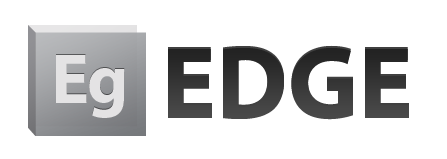
<style>
.page{position:relative;width:447px;height:159px;background:#ffffff}
.page>*{position:absolute;margin:0}
.t1{font:102.7px "MyriadPro-Bold";color:#363636}
.t2{font:71px "MyriadPro-Bold";letter-spacing:-0.015em;color:#e4e3e4}
</style>
<div class="page">
<p class="t1" style="left:168px;top:47px;width:241px;height:73px">EDGE</p>
<p class="t2" style="left:56px;top:55px;width:69px;height:63px">Eg</p>
</div>
